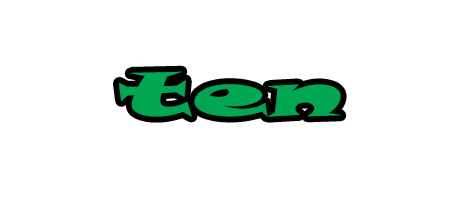
<style>
.page{position:relative;width:462px;height:199px;background:#ffffff}
.page>*{position:absolute;margin:0}
.t1{font:60px "SnapITC-Regular";color:#00a651;scale:2 1}
</style>
<div class="page">
<p class="t1" style="left:119px;top:71px;width:222px;height:46px">ten</p>
</div>
